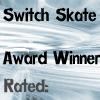
<style>
.page{position:relative;width:100px;height:100px}
.page>*{position:absolute;margin:0}
.t1{font:18px "Decaying";color:#000000}
.t2{font:18px "Decaying";color:#4b4b4b}
</style>
<div class="page">
<p class="t1" style="left:3px;top:7px;width:97px;height:58px">Switch Skate<br><br>Award Winner</p>
<p class="t2" style="left:4px;top:78px;width:45px;height:15px">Rated:</p>
</div>
